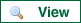
<style>
.page{position:relative;width:81px;height:23px;background:#ffffff}
.page>*{position:absolute;margin:0}
.t1{font:14px "Helvetica-Bold";color:#00653a}
</style>
<div class="page">
<p class="t1" style="left:38px;top:6px;width:32px;height:12px">View</p>
</div>
